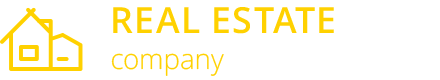
<style>
.page{position:relative;width:440px;height:80px;background:#ffffff}
.page>*{position:absolute;margin:0}
.t1{font:36px/44px "OpenSans-Semibold";letter-spacing:0.025em;color:#ffd100;text-transform:uppercase}
.t2{font:28px/36px "OpenSans-Light";color:#ffd100}
</style>
<div class="page">
<p class="t1" style="left:111px;top:7px;width:223px;height:69px">Real Estate<br><span class="t2">company</span></p>
</div>
